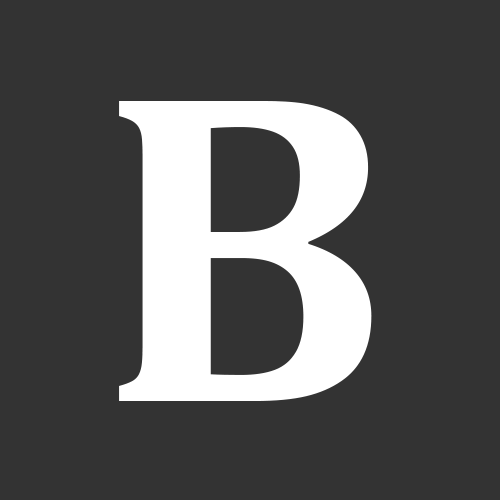
<style>
.page{position:relative;width:500px;height:500px;background:#333333}
.page>*{position:absolute;margin:0}
.t1{font:450px "Cambria-Bold";color:#ffffff}
</style>
<div class="page">
<p class="t1" style="left:119px;top:101px;width:253px;height:300px">B</p>
</div>
